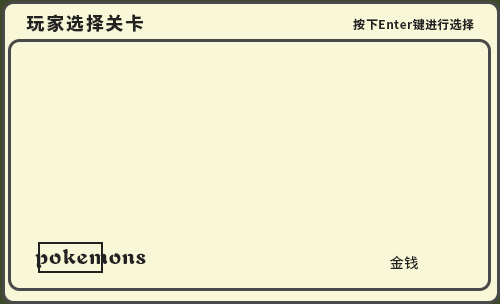
<style>
.page{position:relative;width:500px;height:304px;background:#f8f7d8}
.page>*{position:absolute;margin:0}
.t1{font:18px "SourceHanSansCN-Heavy";letter-spacing:0.1em;color:#222222}
.t2{font:12px "SourceHanSansCN-Bold";letter-spacing:0.03em;color:#222222}
.t3{font:21px "JJianzi";letter-spacing:0.04em;color:#222222}
.t4{font:14px "SourceHanSansCN-Regular";letter-spacing:0.04em;color:#222222}
</style>
<div class="page">
<p class="t1" style="left:26px;top:14px;width:117px;height:18px">玩家选择关卡</p>
<p class="t2" style="left:353px;top:18px;width:121px;height:13px">按下Enter键进行选择</p>
<p class="t3" style="left:35px;top:249px;width:111px;height:20px">pokemons</p>
<p class="t4" style="left:390px;top:255px;width:28px;height:15px">金钱</p>
</div>
